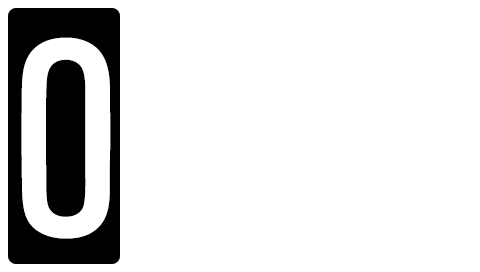
<style>
.page{position:relative;width:480px;height:272px;background:#ffffff}
.page>*{position:absolute;margin:0}
.t1{font:109.2px "AkzidenzGroteskBQ-Cnd";color:#ffffff}
</style>
<div class="page">
<p class="t1" style="left:21px;top:37px;width:90px;height:202px;text-align:center">0</p>
</div>
